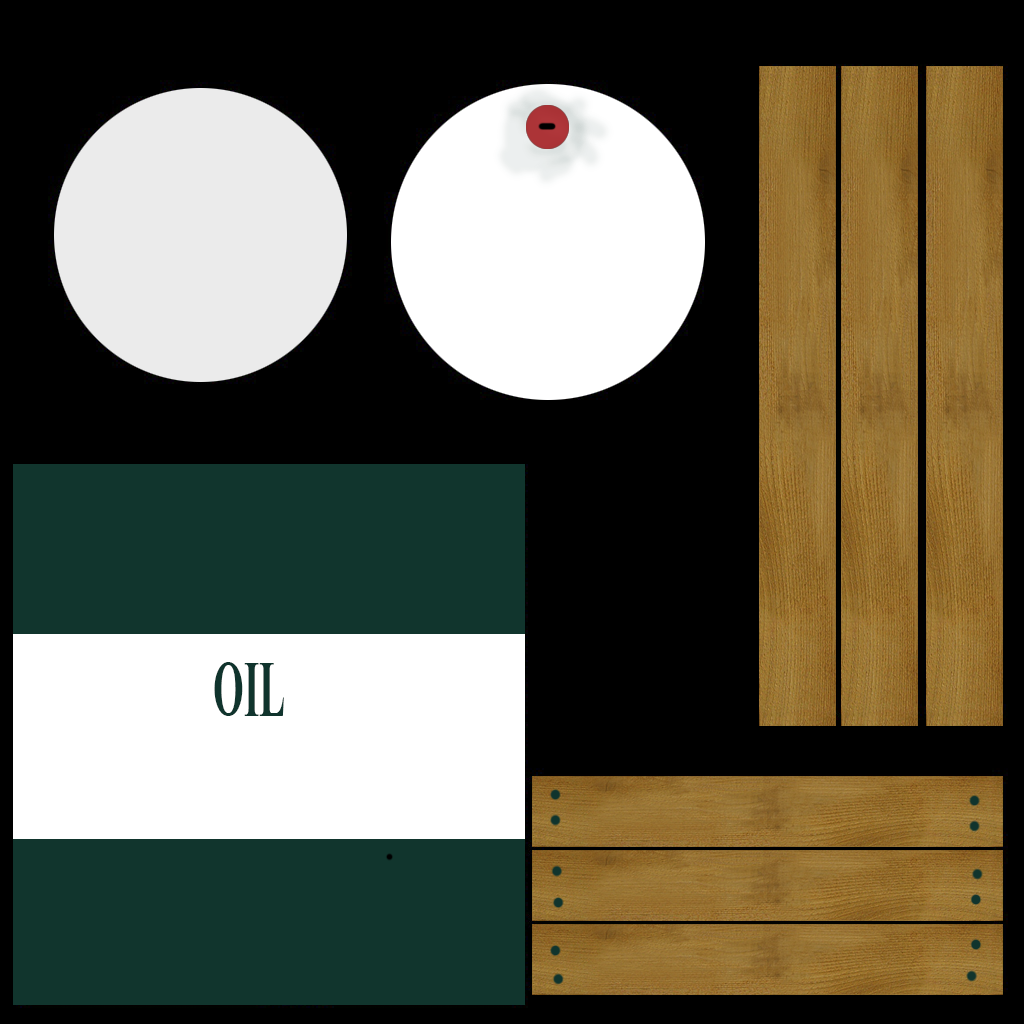
<style>
.page{position:relative;width:1024px;height:1024px;background:#000000}
.page>*{position:absolute;margin:0}
.t1{font:100px "Aparajita-Bold";color:#10342d;scale:0.49 1}
</style>
<div class="page">
<p class="t1" style="left:214px;top:662px;width:70px;height:54px">OIL</p>
</div>
